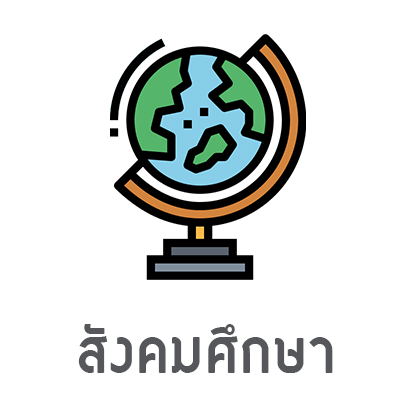
<style>
.page{position:relative;width:400px;height:400px;background:#ffffff}
.page>*{position:absolute;margin:0}
.t1{font:83.3px "Circular-Bold";color:#56585b}
</style>
<div class="page">
<p class="t1" style="left:78px;top:324px;width:255px;height:49px">สังคมศึกษา</p>
</div>
